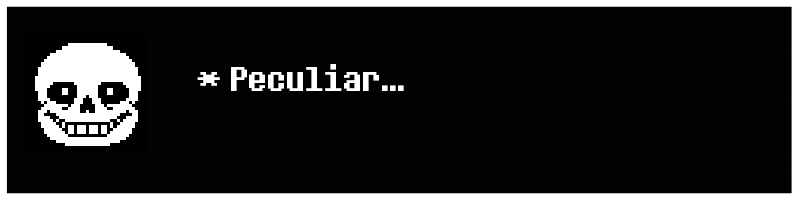
<style>
.page{position:relative;width:800px;height:200px;background:#020202}
.page>*{position:absolute;margin:0}
.t1{font:36px "DeterminationSans";color:#ffffff}
</style>
<div class="page">
<p class="t1" style="left:197px;top:64px;width:207px;height:27px">* Peculiar...</p>
</div>
